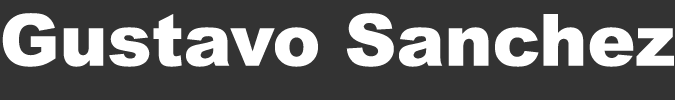
<style>
.page{position:relative;width:675px;height:100px;background:#333333}
.page>*{position:absolute;margin:0}
.t1{font:72px "Arial-Black";color:#ffffff}
</style>
<div class="page">
<p class="t1" style="left:2px;top:13px;width:672px;height:54px">Gustavo Sanchez</p>
</div>
